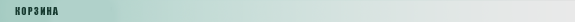
<style>
.page{position:relative;width:575px;height:22px}
.page>*{position:absolute;margin:0}
.t1{font:10px "Impact";letter-spacing:0.1em;color:#183b31}
</style>
<div class="page">
<p class="t1" style="left:15px;top:7px;width:43px;height:8px">КОРЗИНА</p>
</div>
